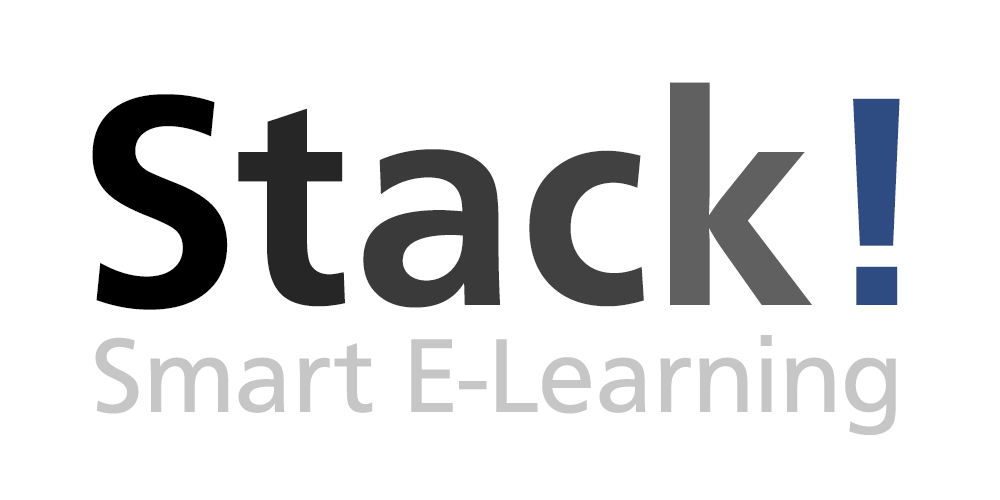
<style>
.page{position:relative;width:1000px;height:500px;background:#ffffff}
.page>*{position:absolute;margin:0}
.t1{font:309px "CartoGothicStd-Bold";color:#000000}
.t2{font:309px "CartoGothicStd-Bold";color:#262626}
.t3{font:309px "CartoGothicStd-Bold";color:#3a3a3a}
.t4{font:309px "CartoGothicStd-Bold";color:#424141}
.t5{font:309px "CartoGothicStd-Bold";color:#606060}
.t6{font:309px "CartoGothicStd-Bold";color:#2e4c82}
.t7{font:109px "CartoGothicStd-Book";color:#c6c6c6}
</style>
<div class="page">
<p class="t1" style="left:92px;top:82px;width:808px;height:228px">S<span class="t2">t</span><span class="t3">a</span><span class="t4">c</span><span class="t5">k</span><span class="t6">!</span></p>
<p class="t7" style="left:95px;top:335px;width:801px;height:100px">Smart E-Learning</p>
</div>
